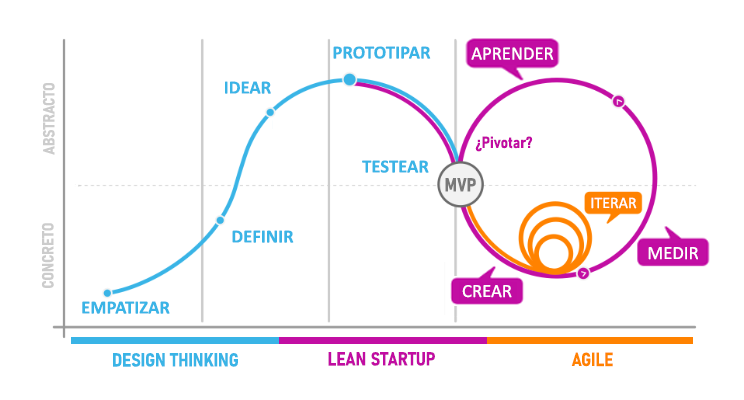
<style>
.page{position:relative;width:744px;height:400px;background:#ffffff}
.page>*{position:absolute;margin:0}
.t1{font:18.7px "Calibri-Bold";color:#3ab4e6}
.t2{font:18.7px "Calibri";color:#ffffff}
.t3{font:16px "Bahnschrift-BoldSemiCondensed";color:#cccccc}
.t4{font:16px "Bahnschrift-BoldSemiCondensed";color:#c109a1}
.t5{font:18.7px "Bahnschrift-BoldSemiCondensed";color:#797979}
.t6{font:16px "Calibri";color:#ffffff}
.t7{font:18.7px "Bahnschrift-BoldSemiCondensed";color:#39b4e6}
.t8{font:18.7px "Bahnschrift-BoldSemiCondensed";color:#c10ca2}
.t9{font:18.7px "Bahnschrift-BoldSemiCondensed";color:#ff8200}
</style>
<div class="page">
<p class="t1" style="left:333px;top:46px;width:98px;height:13px">PROTOTIPAR</p>
<p class="t2" style="left:471px;top:47px;width:83px;height:13px">APRENDER</p>
<p class="t3" style="left:42px;top:83px;width:13px;height:72px;rotate:-90deg">ABSTRACTO</p>
<p class="t1" style="left:225px;top:81px;width:46px;height:13px">IDEAR</p>
<p class="t4" style="left:475px;top:136px;width:58px;height:16px">¿Pivotar?</p>
<p class="t1" style="left:362px;top:160px;width:67px;height:13px">TESTEAR</p>
<p class="t5" style="left:445px;top:178px;width:31px;height:14px">MVP</p>
<p class="t6" style="left:591px;top:197px;width:46px;height:12px">ITERAR</p>
<p class="t3" style="left:41px;top:223px;width:13px;height:65px;rotate:-90deg">CONCRETO</p>
<p class="t1" style="left:232px;top:230px;width:62px;height:13px">DEFINIR</p>
<p class="t2" style="left:648px;top:247px;width:50px;height:13px">MEDIR</p>
<p class="t2" style="left:462px;top:285px;width:50px;height:13px">CREAR</p>
<p class="t1" style="left:82px;top:301px;width:88px;height:13px">EMPATIZAR</p>
<p class="t7" style="left:113px;top:353px;width:125px;height:14px">DESIGN THINKING</p>
<p class="t8" style="left:328px;top:352px;width:107px;height:14px">LEAN STARTUP</p>
<p class="t9" style="left:571px;top:352px;width:42px;height:15px">AGILE</p>
</div>
